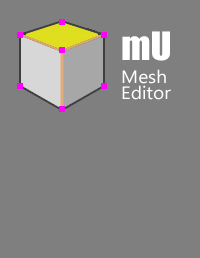
<style>
.page{position:relative;width:200px;height:258px;background:#7f7f7f}
.page>*{position:absolute;margin:0}
.t1{font:36px "Impact";color:#ffffff;scale:1.06 1}
.t2{font:18px/16px "SegoeUISymbol";color:#ffffff;scale:1.06 1}
</style>
<div class="page">
<p class="t1" style="left:122px;top:31px;width:48px;height:30px">mU</p>
<p class="t2" style="left:122px;top:69px;width:49px;height:31px">Mesh<br>Editor</p>
</div>
